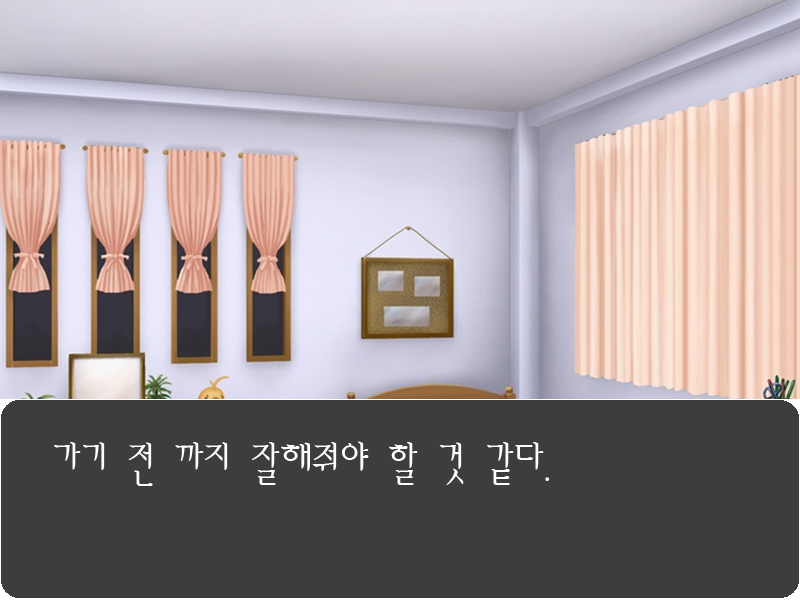
<style>
.page{position:relative;width:800px;height:600px;background:#3d3d3d}
.page>*{position:absolute;margin:0}
.t1{font:48px "AmiR-HM";color:#fdfdfd}
</style>
<div class="page">
<p class="t1" style="left:53px;top:441px;width:497px;height:45px">가기 전 까지 잘해줘야 할 것 같다.</p>
</div>
